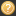
<style>
.page{position:relative;width:16px;height:16px;background:#333333}
.page>*{position:absolute;margin:0}
.t1{font:11px "Verdana";letter-spacing:-0.02em;color:#ffffff}
</style>
<div class="page">
<p class="t1" style="left:6px;top:4px;width:5px;height:8px">?</p>
</div>
